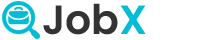
<style>
.page{position:relative;width:200px;height:40px;background:#ffffff}
.page>*{position:absolute;margin:0}
.t1{font:41px "Poppins-SemiBold";color:#333333}
.t2{font:41px "Poppins-SemiBold";color:#333333;text-transform:uppercase}
.t3{font:41px "Poppins-SemiBold";color:#00bcd4}
</style>
<div class="page">
<p class="t1" style="left:43px;top:3px;width:103px;height:32px"><span class="t2">J</span>ob<span class="t3">X</span></p>
</div>
